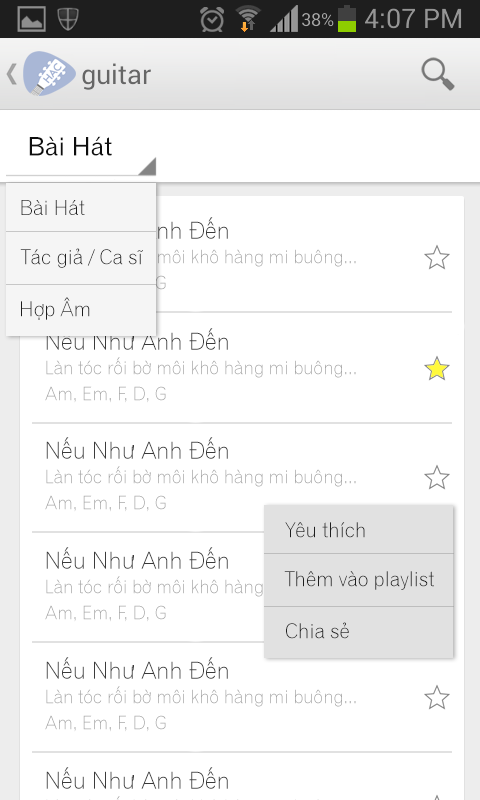
<style>
.page{position:relative;width:480px;height:800px;background:#ffffff}
.page>*{position:absolute;margin:0}
.t1{font:25px "UVNGioMay";color:#0e0e0e}
.t2{font:20px "UVNGioMayNhe";color:#1e1e1e}
.t3{font:23px "UVNGioMayNhe";color:#f5f5f5}
.t4{font:18px "UVNGioMayNhe";color:#a5a5a5}
.t5{font:23px "UVNGioMayNhe";color:#3a3a3a}
.t6{font:18px "UVNGioMayNhe";color:#e1e1e1}
</style>
<div class="page">
<p class="t1" style="left:29px;top:136px;width:83px;height:20px">Bài Hát</p>
<p class="t2" style="left:21px;top:200px;width:64px;height:15px">Bài Hát</p>
<p class="t3" style="left:46px;top:217px;width:182px;height:22px">Nếu Như Anh Đến</p>
<p class="t4" style="left:46px;top:246px;width:310px;height:21px">Làn tóc rối bờ môi khô hàng mi buông...</p>
<p class="t2" style="left:20px;top:248px;width:123px;height:20px">Tác giả / Ca sĩ</p>
<p class="t2" style="left:21px;top:297px;width:69px;height:23px">Hợp Âm</p>
<p class="t5" style="left:46px;top:328px;width:182px;height:22px">Nếu Như Anh Đến</p>
<p class="t4" style="left:46px;top:357px;width:310px;height:21px">Làn tóc rối bờ môi khô hàng mi buông...</p>
<p class="t4" style="left:45px;top:386px;width:121px;height:17px">Am, Em, F, D, G</p>
<p class="t5" style="left:46px;top:437px;width:182px;height:22px">Nếu Như Anh Đến</p>
<p class="t4" style="left:46px;top:466px;width:310px;height:21px">Làn tóc rối bờ môi khô hàng mi buông...</p>
<p class="t4" style="left:45px;top:495px;width:121px;height:17px">Am, Em, F, D, G</p>
<p class="t2" style="left:285px;top:522px;width:80px;height:16px">Yêu thích</p>
<p class="t5" style="left:46px;top:547px;width:182px;height:22px">Nếu Như Anh Đến</p>
<p class="t6" style="left:46px;top:576px;width:310px;height:21px">Làn tóc rối bờ môi khô hàng mi buông...</p>
<p class="t2" style="left:284px;top:571px;width:150px;height:19px">Thêm vào playlist</p>
<p class="t4" style="left:45px;top:605px;width:121px;height:17px">Am, Em, F, D, G</p>
<p class="t2" style="left:286px;top:622px;width:63px;height:17px">Chia sẻ</p>
<p class="t5" style="left:46px;top:657px;width:182px;height:22px">Nếu Như Anh Đến</p>
<p class="t4" style="left:46px;top:686px;width:310px;height:21px">Làn tóc rối bờ môi khô hàng mi buông...</p>
<p class="t4" style="left:45px;top:715px;width:121px;height:17px">Am, Em, F, D, G</p>
<p class="t5" style="left:46px;top:767px;width:182px;height:22px">Nếu Như Anh Đến</p>
</div>
